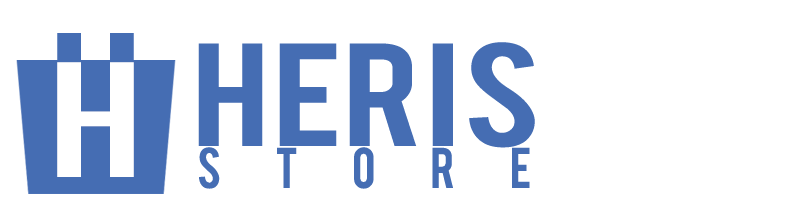
<style>
.page{position:relative;width:812px;height:212px;background:#ffffff}
.page>*{position:absolute;margin:0}
.t1{font:115px "Bebas";color:#456db3;scale:1.28 1}
.t2{font:160.9px "DINEngschrift";color:#ffffff;scale:1.44 1}
.t3{font:45px "Bebas";letter-spacing:1.2em;color:#456db3}
</style>
<div class="page">
<p class="t1" style="left:198px;top:42px;width:337px;height:106px">HERIS</p>
<p class="t2" style="left:57px;top:62px;width:77px;height:115px">H</p>
<p class="t3" style="left:199px;top:147px;width:331px;height:42px">STORE</p>
</div>
